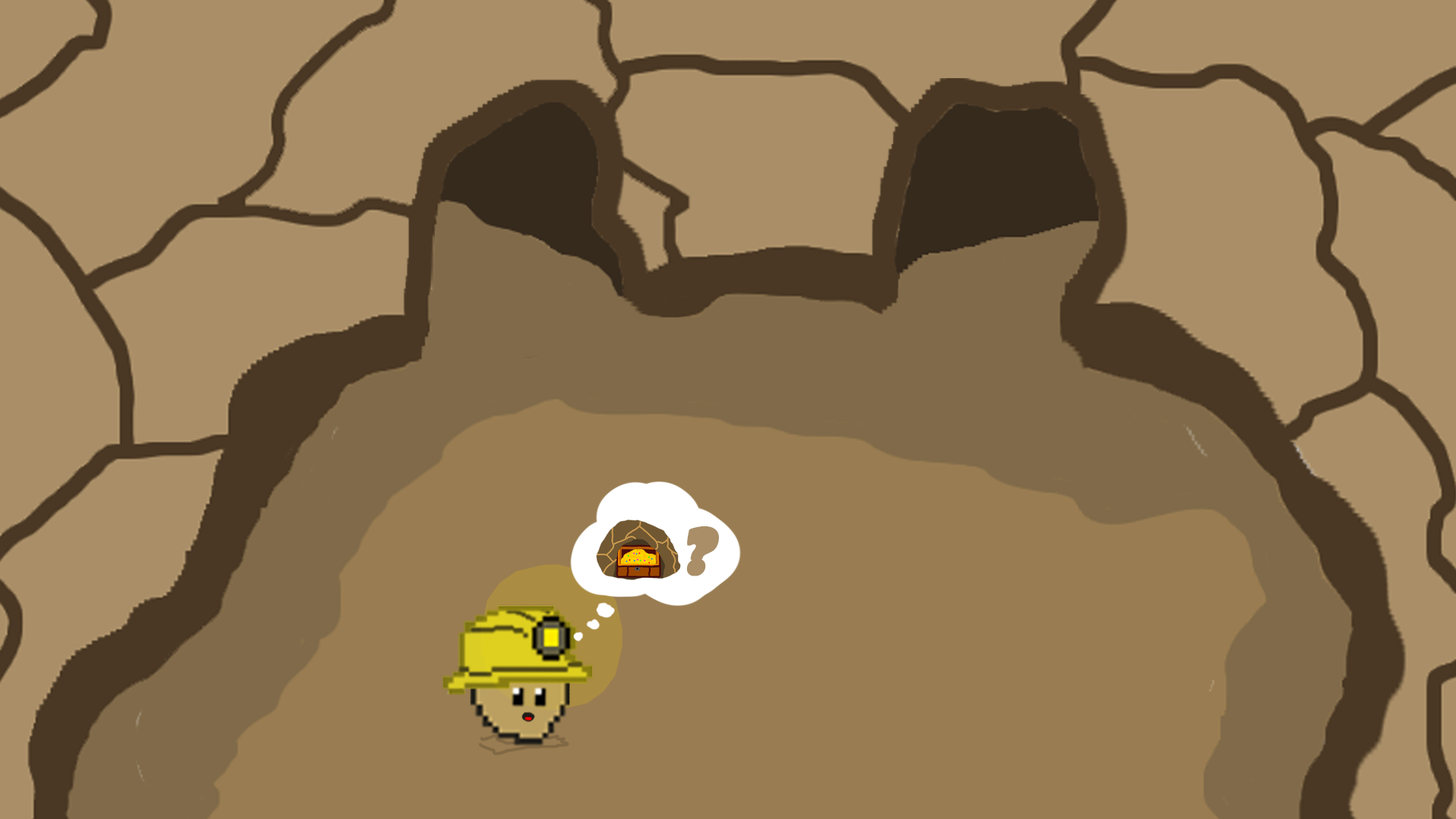
<style>
.page{position:relative;width:1456px;height:819px;background:#a98e67}
.page>*{position:absolute;margin:0}
.t1{font:68.9px "BerlinSansFB-Bold";color:#a98e67;font-weight:bold;font-style:italic}
</style>
<div class="page">
<p class="t1" style="left:686px;top:526px;width:33px;height:50px">?</p>
</div>
